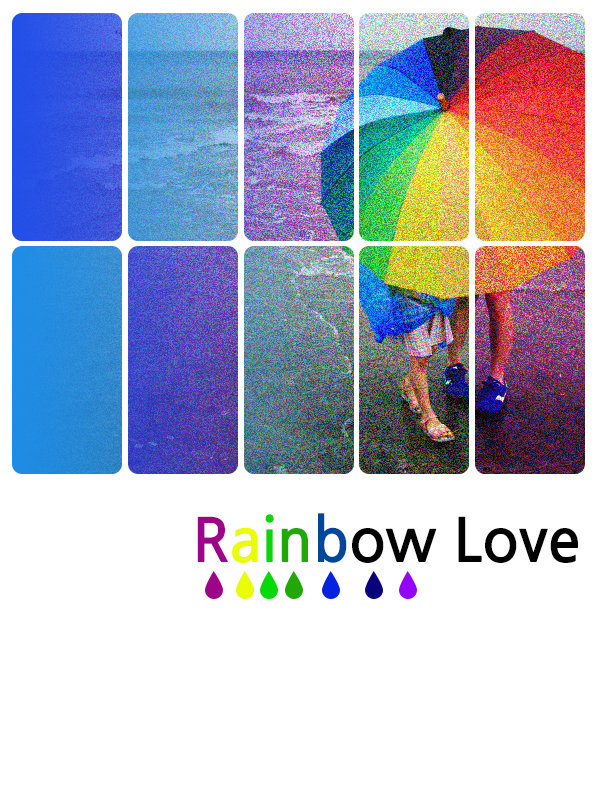
<style>
.page{position:relative;width:600px;height:800px;background:#ffffff}
.page>*{position:absolute;margin:0}
.t1{font:60px "NanumGothicBold";color:#010101}
.t2{font:60px "NanumGothicBold";color:#9e048a}
.t3{font:60px "NanumGothicBold";color:#e9fd05}
.t4{font:60px "NanumGothicBold";color:#07d807}
.t5{font:60px "NanumGothicBold";color:#21a806}
.t6{font:60px "NanumGothicBold";color:#00469b}
</style>
<div class="page">
<p class="t1" style="left:197px;top:513px;width:381px;height:50px"><span class="t2">R</span><span class="t3">a</span><span class="t4">i</span><span class="t5">n</span><span class="t6">b</span>ow Love</p>
</div>
